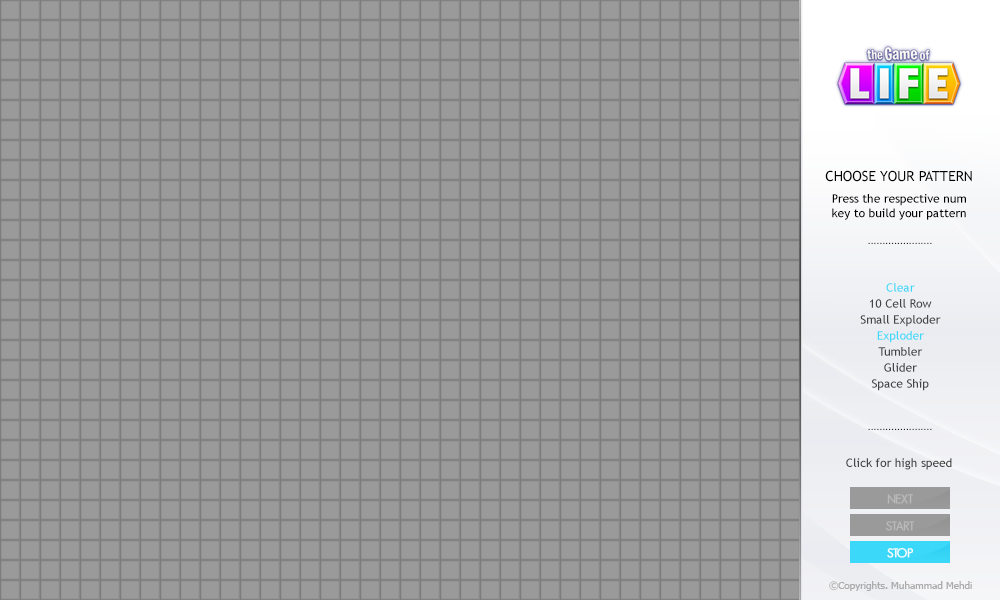
<style>
.page{position:relative;width:1000px;height:600px;background:#9a9a9a}
.page>*{position:absolute;margin:0}
.t1{font:14px "TrebuchetMS";color:#000000}
.t2{font:12px "TrebuchetMS";color:#000000}
.t3{font:8px "TrebuchetMS"}
.t4{font:12px/16px "TrebuchetMS";color:#444444}
.t5{font:12px/16px "TrebuchetMS";color:#3cd8f9}
.t6{font:12px "TrebuchetMS";color:#444444}
.t7{font:12px "GeosansLight";color:#bababa;font-weight:bold}
.t8{font:12px "GeosansLight";color:#ffffff;font-weight:bold}
.t9{font:10px "Tahoma";color:#ababab}
</style>
<div class="page">
<p class="t1" style="left:825px;top:170px;width:147px;height:12px">CHOOSE YOUR PATTERN</p>
<p class="t2" style="left:832px;top:194px;width:134px;height:26px;text-align:center">Press the respective num key to build your pattern</p>
<p class="t3" style="left:868px;top:242px;width:64px;height:2px">......................</p>
<p class="t4" style="left:860px;top:283px;width:81px;height:108px;text-align:center"><span class="t5">Clear<br></span>10 Cell Row<br>Small Exploder<br><span class="t5">Exploder<br></span>Tumbler<br>Glider<br>Space Ship</p>
<p class="t3" style="left:868px;top:428px;width:64px;height:2px">......................</p>
<p class="t6" style="left:846px;top:458px;width:106px;height:12px">Click for high speed</p>
<p class="t7" style="left:887px;top:494px;width:26px;height:10px">NEXT</p>
<p class="t7" style="left:886px;top:521px;width:29px;height:10px">START</p>
<p class="t8" style="left:887px;top:548px;width:26px;height:10px">STOP</p>
<p class="t9" style="left:829px;top:581px;width:143px;height:10px">©Copyrights. Muhammad Mehdi</p>
</div>
